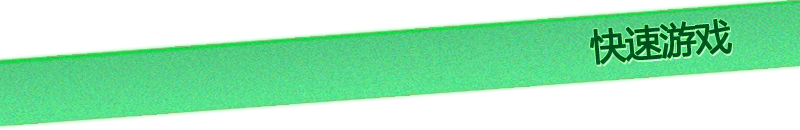
<style>
.page{position:relative;width:800px;height:130px;background:#ffffff}
.page>*{position:absolute;margin:0}
.t1{font:36px "MicrosoftYaHei";letter-spacing:-0.05em;color:#00541e;font-weight:bold}
</style>
<div class="page">
<p class="t1" style="left:590px;top:18px;width:142px;height:46px;rotate:-5deg">快速游戏</p>
</div>
